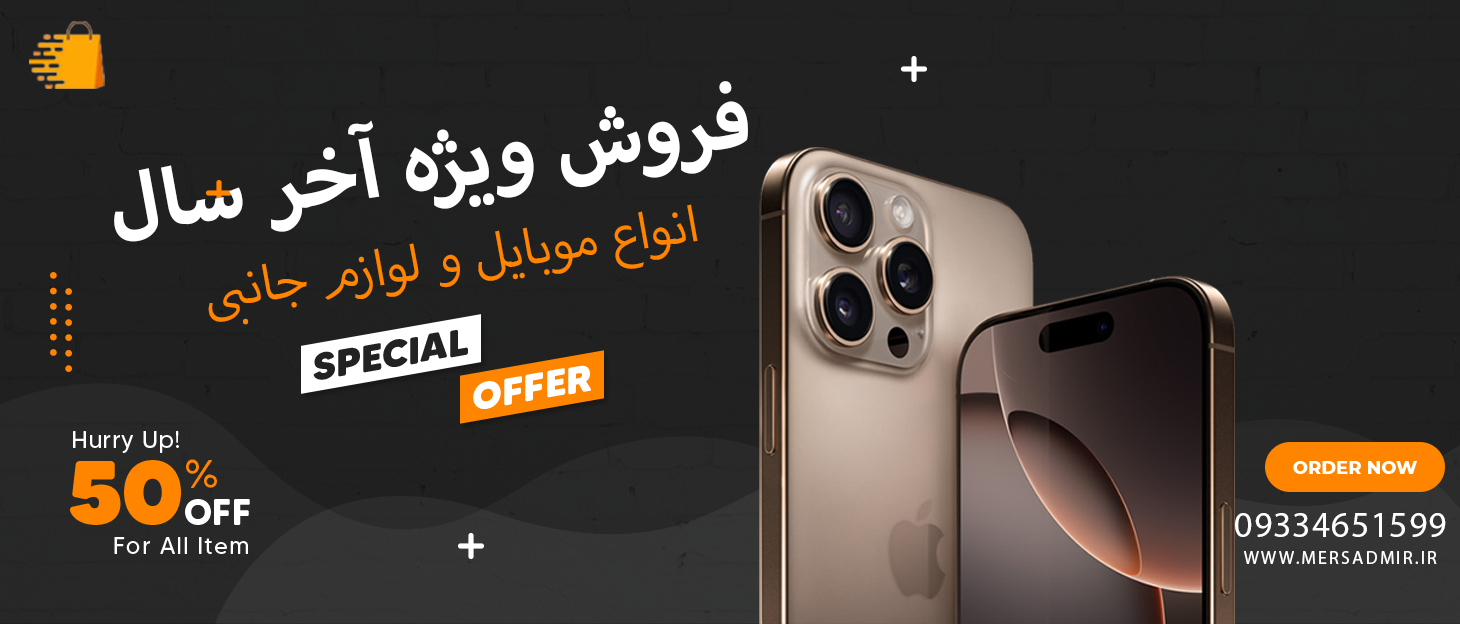
<style>
.page{position:relative;width:1460px;height:624px}
.page>*{position:absolute;margin:0}
.t1{font:114.5px "MyriadArabic-Bold";color:#ffffff}
.t2{font:70.9px "MyriadArabic-Regular";color:#ff8400}
.t3{font:38px "MADETommySoft-ExtraBold";color:#222222;text-transform:uppercase}
.t4{font:38px "MADETommySoft-ExtraBold";color:#ffffff;text-transform:uppercase}
.t5{font:24px "MADETommySoft";letter-spacing:0.025em;color:#ffffff}
.t6{font:90px "MADETommySoft-Black";color:#ff8400;text-transform:uppercase}
.t7{font:40px "MADETommySoft";color:#ff8400;text-transform:uppercase}
.t8{font:18px "Montserrat-ExtraBold";color:#ffffff;text-transform:uppercase}
.t9{font:36px "MADETommySoft-Bold";color:#ffffff;text-transform:uppercase}
.t10{font:36px "MyriadPro-Regular";letter-spacing:0.025em;color:#ffffff}
.t11{font:24px "MADETommySoft";letter-spacing:0.05em;color:#ffffff}
.t12{font:18px "MyriadPro-Regular";letter-spacing:0.12em;color:#ffffff;text-transform:uppercase}
</style>
<div class="page">
<p class="t1" style="left:114px;top:81px;width:634px;height:161px;rotate:-8deg">فروش ویژه آخر سال</p>
<p class="t2" style="left:208px;top:204px;width:490px;height:121px;rotate:-8deg">انواع موبایل و لوازم جانبی</p>
<p class="t3" style="left:313px;top:330px;width:155px;height:50px;rotate:-10deg">Special</p>
<p class="t4" style="left:473px;top:365px;width:118px;height:44px;rotate:-10deg">Offer</p>
<p class="t5" style="left:73px;top:431px;width:106px;height:22px">Hurry Up!</p>
<p class="t6" style="left:70px;top:460px;width:111px;height:65px">50</p>
<p class="t7" style="left:186px;top:459px;width:31px;height:29px">%</p>
<p class="t8" style="left:1293px;top:461px;width:124px;height:13px">Order Now</p>
<p class="t9" style="left:185px;top:499px;width:65px;height:26px">Off</p>
<p class="t10" style="left:1235px;top:513px;width:211px;height:24px">09334651599</p>
<p class="t11" style="left:114px;top:537px;width:134px;height:17px">For All Item</p>
<p class="t12" style="left:1244px;top:551px;width:193px;height:13px">www.mersadmir.ir</p>
</div>
